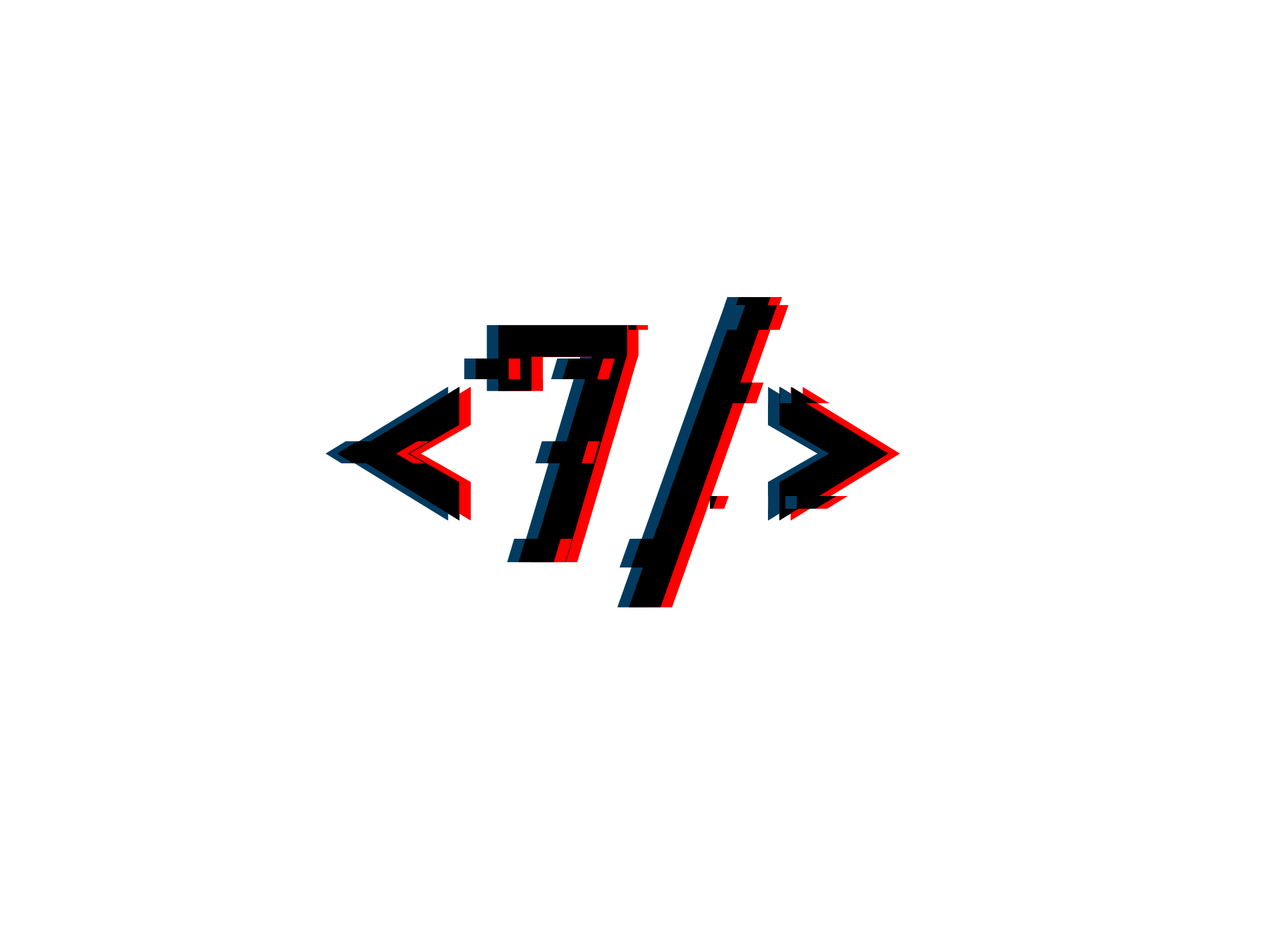
<style>
.page{position:relative;width:1261px;height:946px;background:#ffffff}
.page>*{position:absolute;margin:0}
.t1{font:333.6px "Bahnschrift";color:#000000}
.t2{font:333.6px "Bahnschrift"}
</style>
<div class="page">
<p class="t1" style="left:339px;top:297px;width:538px;height:310px">&lt;7/&gt;</p>
<p class="t1" style="left:350px;top:297px;width:539px;height:310px">&lt;7/&gt;</p>
<p class="t2" style="left:362px;top:297px;width:538px;height:310px">&lt;7/&gt;</p>
</div>
